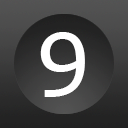
<style>
.page{position:relative;width:128px;height:128px}
.page>*{position:absolute;margin:0}
.t1{font:100px "Consolas";color:#ffffff}
</style>
<div class="page">
<p class="t1" style="left:40px;top:32px;width:45px;height:65px">9</p>
</div>
